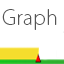
<style>
.page{position:relative;width:64px;height:64px;background:#ffffff}
.page>*{position:absolute;margin:0}
.t1{font:20.6px "KozGoPr6N-ExtraLight";color:#545454}
</style>
<div class="page">
<p class="t1" style="left:2px;top:9px;width:55px;height:21px">Graph</p>
</div>
